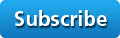
<style>
.page{position:relative;width:120px;height:38px}
.page>*{position:absolute;margin:0}
.t1{font:20.8px "FrutigerLTStd-Bold";color:#ffffff}
</style>
<div class="page">
<p class="t1" style="left:15px;top:10px;width:92px;height:16px">Subscribe</p>
</div>
